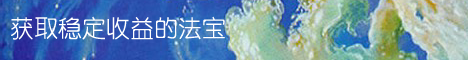
<style>
.page{position:relative;width:468px;height:60px}
.page>*{position:absolute;margin:0}
.t1{font:24px "YouYuan";color:#ffffff}
</style>
<div class="page">
<p class="t1" style="left:11px;top:16px;width:214px;height:24px">获取稳定收益的法宝</p>
</div>
